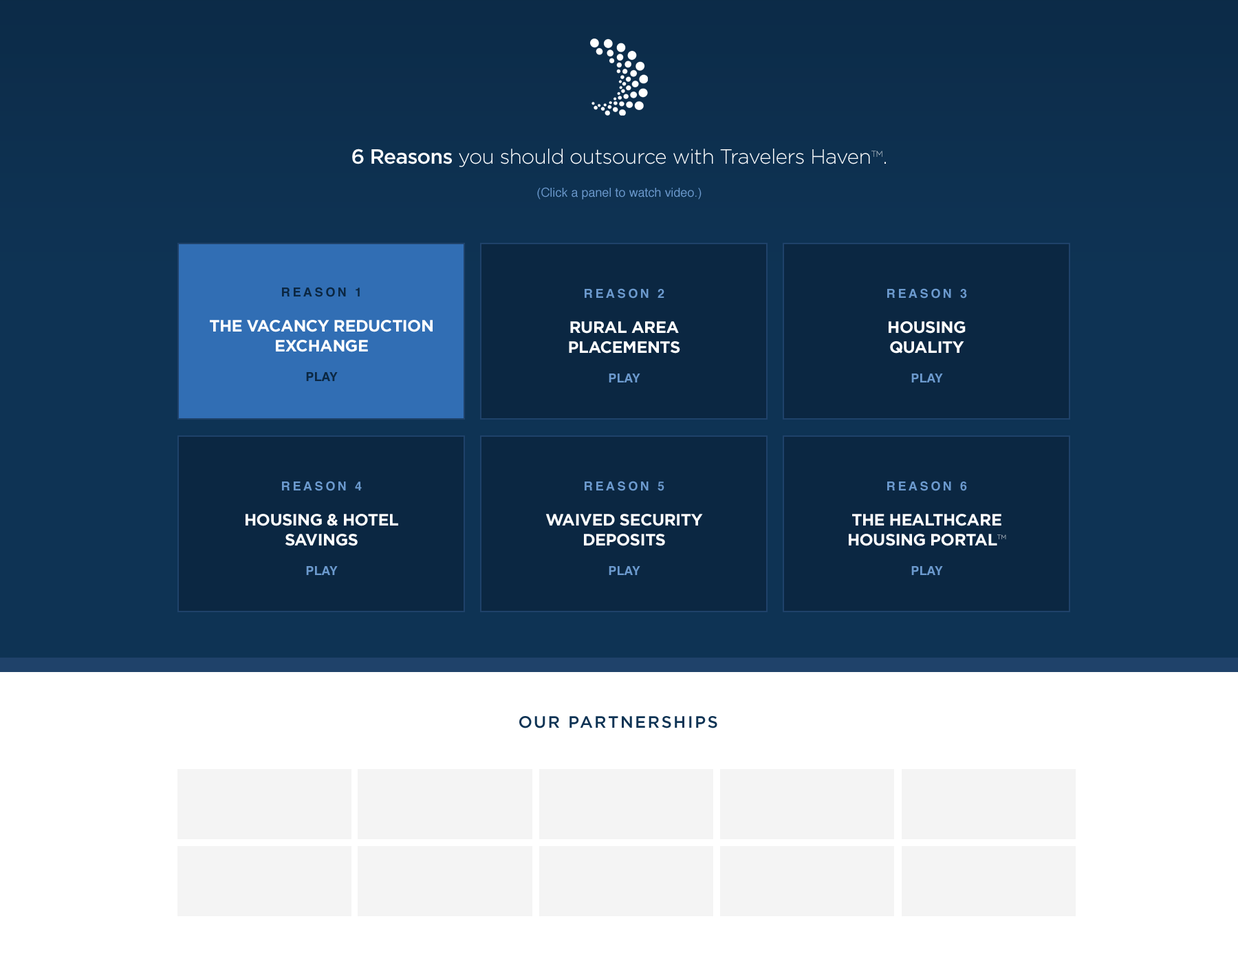
<style>
.page{position:relative;width:1238px;height:963px}
.page>*{position:absolute;margin:0}
.t1{font:12.4px/33px "Helvetica";color:#6c9ace}
.t2{font:20.6px/24.8px "Gotham-Medium";letter-spacing:-0.025em;color:#ffffff}
.t3{font:20.6px/24.8px "Gotham-Light";letter-spacing:-0.025em;color:#ffffff}
.t4{font:20.6px/33px "Gotham-Light";letter-spacing:-0.025em;color:#ffffff}
.t5{font:8.3px/33px "Gotham-Light";letter-spacing:-0.025em;color:#ffffff}
.t6{font:16.5px/19.8px "Gotham-Bold";letter-spacing:-0.025em;color:#ffffff;text-transform:uppercase}
.t7{font:12.4px/14.9px "Helvetica-Bold";letter-spacing:0.2em;color:#0b2742}
.t8{font:12.4px/14.9px "Helvetica-Bold";color:#0b2742}
.t9{font:12.4px/14.9px "Helvetica-Bold";letter-spacing:0.2em;color:#6c9ace}
.t10{font:12.4px/14.9px "Helvetica-Bold";color:#6c9ace}
.t11{font:6.2px/19.8px "Gotham-Light";letter-spacing:-0.025em;color:#ffffff;text-transform:uppercase}
.t12{font:16.5px "Gotham-Medium";letter-spacing:0.1em;color:#0e3354}
</style>
<div class="page">
<p class="t1" style="left:352px;top:149px;width:534px;height:50px;text-align:center"><span class="t2">6 Reasons</span><span class="t3"> you should outsource</span><span class="t4"> with Travelers Haven</span><span class="t5">TM</span><span class="t4">.<br></span>(Click a panel to watch video.)</p>
<p class="t6" style="left:210px;top:287px;width:223px;height:94px;text-align:center"><span class="t7">REASON 1<br><br></span>The Vacancy Reduction Exchange<br><br><span class="t8">PLAY</span></p>
<p class="t6" style="left:569px;top:288px;width:111px;height:94px;text-align:center"><span class="t9">REASON 2<br><br></span>Rural Area<br>Placements<br><br><span class="t10">PLAY</span></p>
<p class="t6" style="left:887px;top:288px;width:80px;height:94px;text-align:center"><span class="t9">REASON 3<br><br></span>Housing<br>Quality<br><br><span class="t10">PLAY</span></p>
<p class="t6" style="left:246px;top:481px;width:152px;height:94px;text-align:center"><span class="t9">REASON 4<br><br></span>Housing &amp; Hotel<br>Savings<br><br><span class="t10">PLAY</span></p>
<p class="t6" style="left:545px;top:481px;width:158px;height:94px;text-align:center"><span class="t9">REASON 5<br><br></span>Waived Security<br>Deposits<br><br><span class="t10">PLAY</span></p>
<p class="t6" style="left:849px;top:481px;width:157px;height:94px;text-align:center"><span class="t9">REASON 6<br><br></span>The Healthcare<br>Housing Portal<span class="t11">TM<br><br></span><span class="t10">PLAY</span></p>
<p class="t12" style="left:519px;top:716px;width:198px;height:12px">OUR PARTNERSHIPS</p>
</div>
